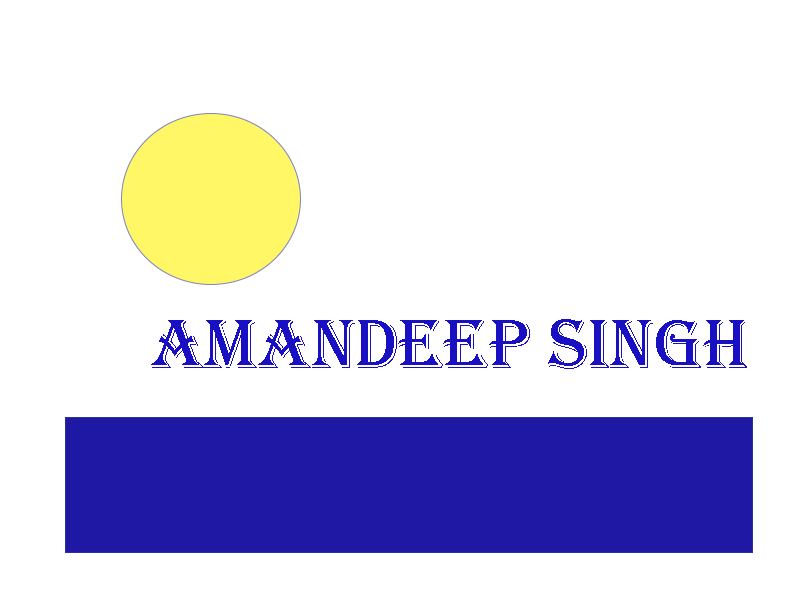
<style>
.page{position:relative;width:800px;height:600px;background:#ffffff}
.page>*{position:absolute;margin:0}
.t1{font:72px "Algerian";color:#1810c2}
</style>
<div class="page">
<p class="t1" style="left:151px;top:319px;width:596px;height:50px">amandeep singh</p>
</div>
